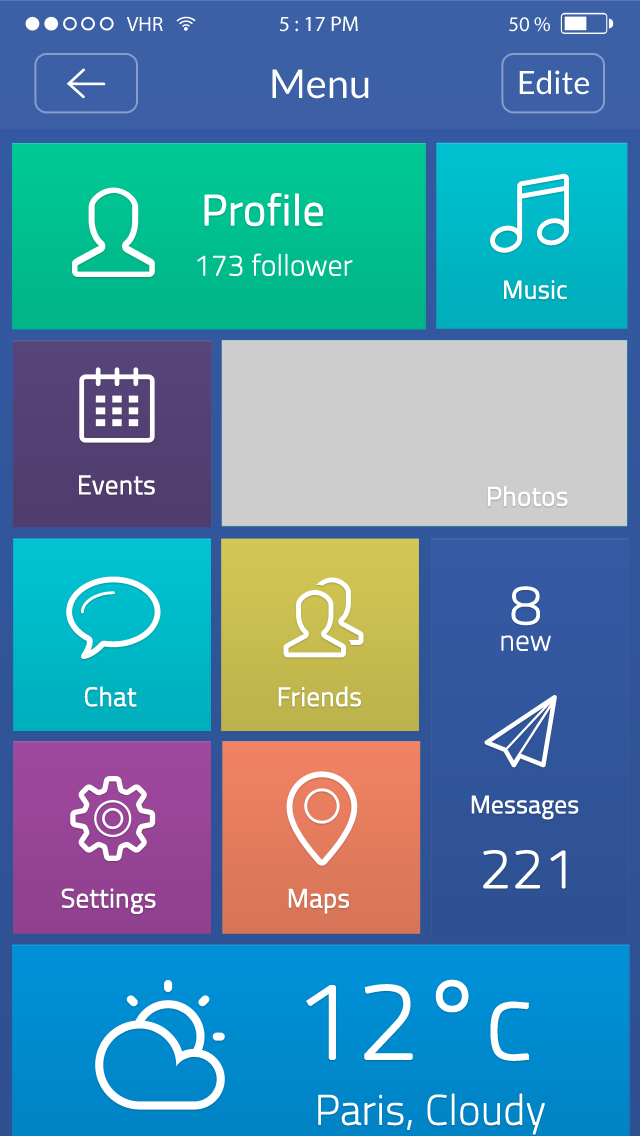
<style>
.page{position:relative;width:640px;height:1136px}
.page>*{position:absolute;margin:0}
.t1{font:20.9px "MyriadPro-Regular";color:#ffffff}
.t2{font:21.7px "MyriadPro-Regular";color:#ffffff}
.t3{font:40px "Lato-Regular";color:#ffffff}
.t4{font:31.9px "Lato-Regular";color:#ffffff}
.t5{font:42.9px "TitilliumWeb-Light";color:#ffffff;font-weight:bold}
.t6{font:28.6px "TitilliumWeb-Thin";color:#ffffff;font-weight:bold}
.t7{font:25.3px "TitilliumWeb-Light";color:#ffffff;font-weight:bold}
.t8{font:26.3px "TitilliumWeb-Light";color:#ffffff;font-weight:bold}
.t9{font:54.8px "TitilliumWeb-Thin";color:#ffffff;font-weight:bold}
.t10{font:28.2px "TitilliumWeb-Thin";color:#ffffff;font-weight:bold}
.t11{font:26.2px "TitilliumWeb-Light";color:#ffffff;font-weight:bold}
.t12{font:24.6px "TitilliumWeb-Light";color:#ffffff;font-weight:bold}
.t13{font:108.6px "TitilliumWeb-Thin";color:#ffffff;font-weight:bold}
.t14{font:41.3px "TitilliumWeb-Thin";color:#ffffff;font-weight:bold}
</style>
<div class="page">
<p class="t1" style="left:126px;top:17px;width:37px;height:14px">VHR</p>
<p class="t2" style="left:279px;top:16px;width:79px;height:16px">5 : 17 PM</p>
<p class="t1" style="left:509px;top:17px;width:41px;height:15px">50 %</p>
<p class="t3" style="left:272px;top:69px;width:97px;height:30px">Menu</p>
<p class="t4" style="left:519px;top:70px;width:70px;height:25px">Edite</p>
<p class="t5" style="left:204px;top:193px;width:119px;height:34px">Profile</p>
<p class="t6" style="left:197px;top:253px;width:156px;height:24px">173 follower</p>
<p class="t7" style="left:504px;top:280px;width:63px;height:20px">Music</p>
<p class="t8" style="left:79px;top:475px;width:76px;height:20px">Events</p>
<p class="t8" style="left:488px;top:486px;width:80px;height:21px">Photos</p>
<p class="t9" style="left:511px;top:586px;width:29px;height:40px">8</p>
<p class="t10" style="left:501px;top:635px;width:50px;height:16px">new</p>
<p class="t11" style="left:84px;top:686px;width:53px;height:21px">Chat</p>
<p class="t11" style="left:278px;top:686px;width:83px;height:21px">Friends</p>
<p class="t12" style="left:471px;top:795px;width:108px;height:25px">Messages</p>
<p class="t9" style="left:483px;top:850px;width:83px;height:39px">221</p>
<p class="t11" style="left:61px;top:888px;width:95px;height:26px">Settings</p>
<p class="t11" style="left:288px;top:888px;width:61px;height:26px">Maps</p>
<p class="t13" style="left:306px;top:979px;width:224px;height:82px">12°c</p>
<p class="t14" style="left:318px;top:1093px;width:227px;height:42px">Paris, Cloudy</p>
</div>
